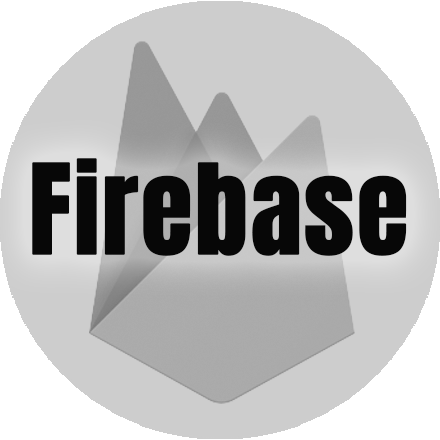
<style>
.page{position:relative;width:440px;height:440px;background:#cdcdcd}
.page>*{position:absolute;margin:0}
.t1{font:105.1px "Anton-Regular";color:#070707;font-weight:bold}
</style>
<div class="page">
<p class="t1" style="left:32px;top:158px;width:375px;height:98px">Firebase</p>
</div>
